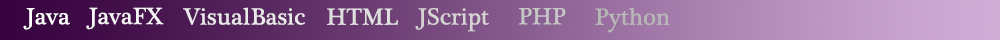
<style>
.page{position:relative;width:1000px;height:40px}
.page>*{position:absolute;margin:0}
.t1{font:24px "PlantagenetCherokee";letter-spacing:0.005em;color:#ffffff}
.t2{font:24px "PlantagenetCherokee";letter-spacing:0.005em;color:#f5f4f4}
.t3{font:24px "PlantagenetCherokee";letter-spacing:0.005em;color:#eae9e9}
.t4{font:24px "PlantagenetCherokee";letter-spacing:0.005em;color:#e0dfdf}
.t5{font:24px "PlantagenetCherokee";letter-spacing:0.005em;color:#d4d2d2}
.t6{font:24px "PlantagenetCherokee";letter-spacing:0.005em;color:#c6c6c6}
.t7{font:24px "PlantagenetCherokee";letter-spacing:0.005em;color:#b8b7b7}
</style>
<div class="page">
<p class="t1" style="left:23px;top:8px;width:47px;height:22px">Java</p>
<p class="t2" style="left:86px;top:7px;width:78px;height:23px">JavaFX</p>
<p class="t3" style="left:183px;top:7px;width:122px;height:18px">VisualBasic</p>
<p class="t4" style="left:327px;top:8px;width:71px;height:17px">HTML</p>
<p class="t5" style="left:415px;top:8px;width:74px;height:24px">JScript</p>
<p class="t6" style="left:518px;top:8px;width:48px;height:17px">PHP</p>
<p class="t7" style="left:595px;top:8px;width:75px;height:25px">Python</p>
</div>
